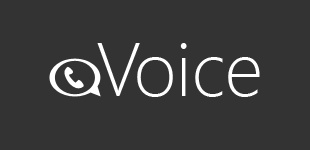
<style>
.page{position:relative;width:310px;height:150px;background:#333333}
.page>*{position:absolute;margin:0}
.t1{font:75px "SegoeUI-Light";color:#ffffff}
</style>
<div class="page">
<p class="t1" style="left:97px;top:43px;width:163px;height:54px">Voice</p>
</div>
